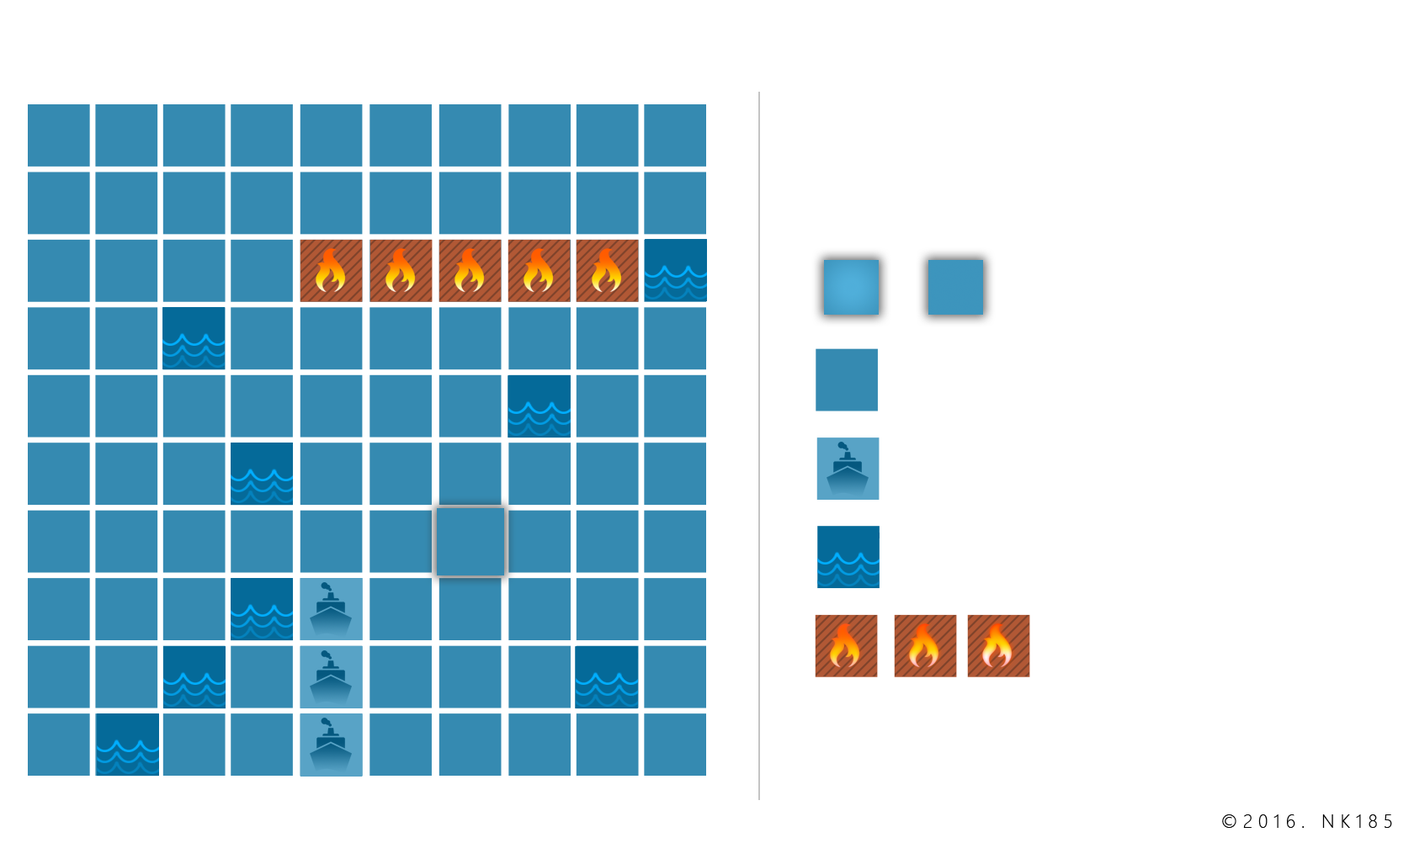
<style>
.page{position:relative;width:1414px;height:843px;background:#ffffff}
.page>*{position:absolute;margin:0}
.t1{font:18.7px "SegoeUI-Light";letter-spacing:0.3em;color:#000000;text-transform:uppercase}
</style>
<div class="page">
<p class="t1" style="left:1222px;top:815px;width:170px;height:13px">©2016. NK185</p>
</div>
